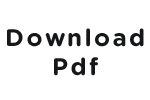
<style>
.page{position:relative;width:150px;height:100px;background:#ffffff}
.page>*{position:absolute;margin:0}
.t1{font:24px "GothamRounded-Bold";letter-spacing:0.1em;color:#161718}
</style>
<div class="page">
<p class="t1" style="left:7px;top:28px;width:137px;height:48px;text-align:center">Download<br>Pdf</p>
</div>
